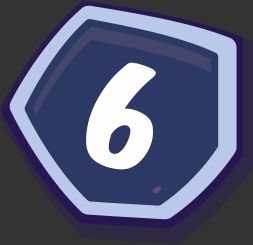
<style>
.page{position:relative;width:253px;height:245px;background:#2c3964}
.page>*{position:absolute;margin:0}
.t1{font:120px "KomikaAxis";color:#fffefd}
</style>
<div class="page">
<p class="t1" style="left:86px;top:62px;width:70px;height:108px">6</p>
</div>
